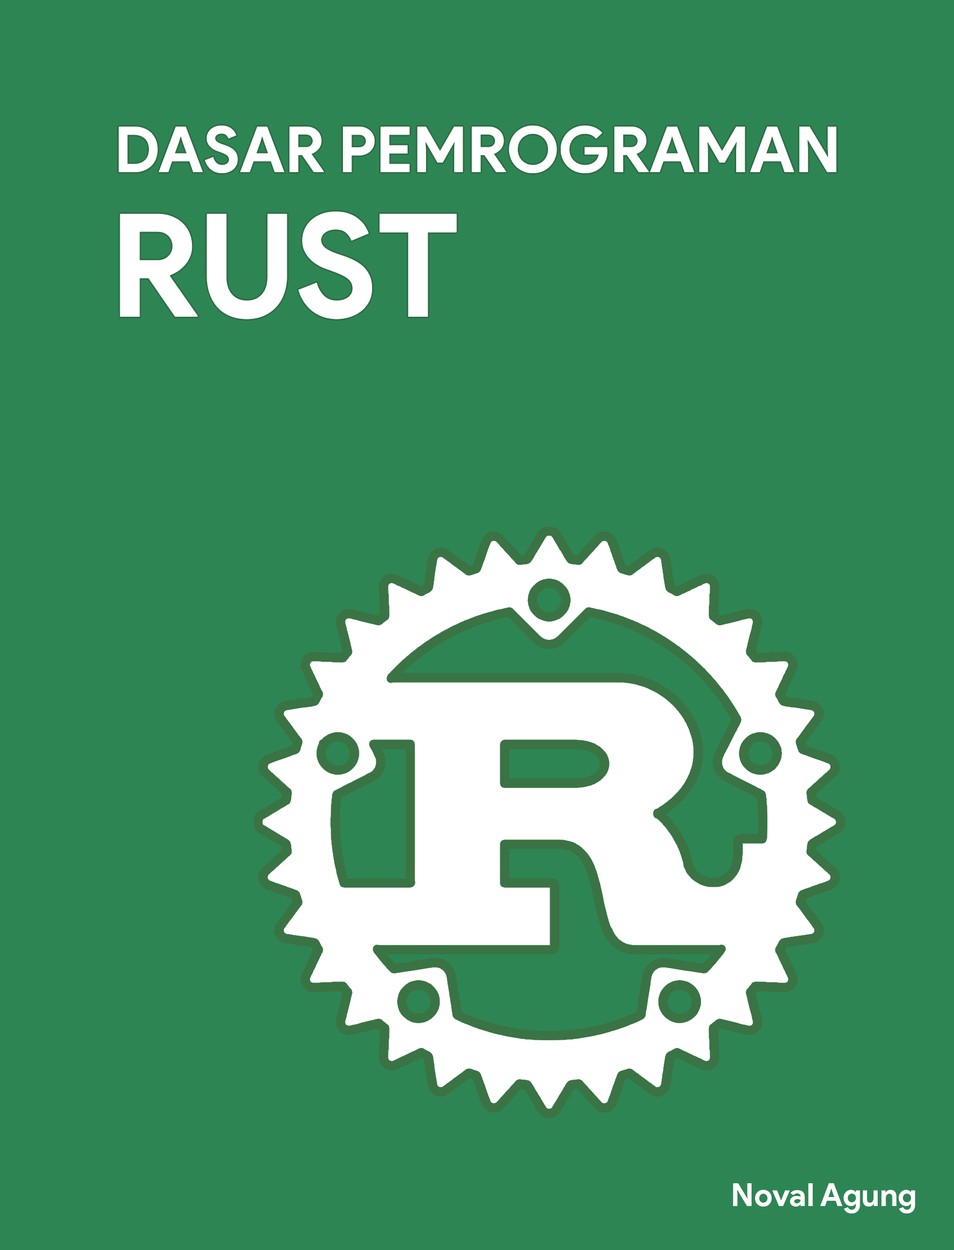
<style>
.page{position:relative;width:954px;height:1250px;background:#2e8554}
.page>*{position:absolute;margin:0}
.t1{font:63.6px "ProductSans-Bold";color:#ffffff}
.t2{font:143.6px "ProductSans-Bold";color:#ffffff}
.t3{font:31.8px "ProductSans-Bold";color:#ffffff}
</style>
<div class="page">
<p class="t1" style="left:119px;top:126px;width:717px;height:47px">DASAR PEMROGRAMAN</p>
<p class="t2" style="left:120px;top:211px;width:337px;height:108px">RUST</p>
<p class="t3" style="left:733px;top:1184px;width:182px;height:30px">Noval Agung</p>
</div>
